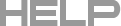
<style>
.page{position:relative;width:121px;height:26px;background:#999999}
.page>*{position:absolute;margin:0}
.t1{font:50px "Bitsumishi";color:#999999}
</style>
<div class="page">
<p class="t1" style="left:0px;top:0px;width:121px;height:26px">Help</p>
</div>
